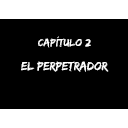
<style>
.page{position:relative;width:128px;height:128px;background:#000000}
.page>*{position:absolute;margin:0}
.t1{font:10.7px "EdoSZ";color:#ffffff;scale:1.05 1}
.t2{font:12.3px "EdoSZ";color:#ffffff}
</style>
<div class="page">
<p class="t1" style="left:38px;top:36px;width:53px;height:12px">Capítulo 2</p>
<p class="t2" style="left:21px;top:61px;width:88px;height:11px">El perpetrador</p>
</div>
